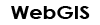
<style>
.page{position:relative;width:100px;height:25px;background:#ffffff}
.page>*{position:absolute;margin:0}
.t1{font:18px "CenturyGothic-Bold";color:#000000;scale:1.15 1}
</style>
<div class="page">
<p class="t1" style="left:11px;top:6px;width:79px;height:13px">WebGIS</p>
</div>
